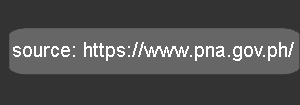
<style>
.page{position:relative;width:300px;height:105px;background:#333333}
.page>*{position:absolute;margin:0}
.t1{font:20px "ArialMT";color:#ffffff}
</style>
<div class="page">
<p class="t1" style="left:13px;top:42px;width:281px;height:19px">source: https://www.pna.gov.ph/</p>
</div>
